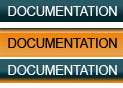
<style>
.page{position:relative;width:123px;height:88px}
.page>*{position:absolute;margin:0}
.t1{font:12.7px "ArialMT";color:#ffffff}
.t2{font:12.7px "ArialMT";color:#000000}
</style>
<div class="page">
<p class="t1" style="left:8px;top:6px;width:109px;height:10px">DOCUMENTATION</p>
<p class="t2" style="left:8px;top:38px;width:109px;height:10px">DOCUMENTATION</p>
<p class="t1" style="left:8px;top:65px;width:109px;height:10px">DOCUMENTATION</p>
</div>
